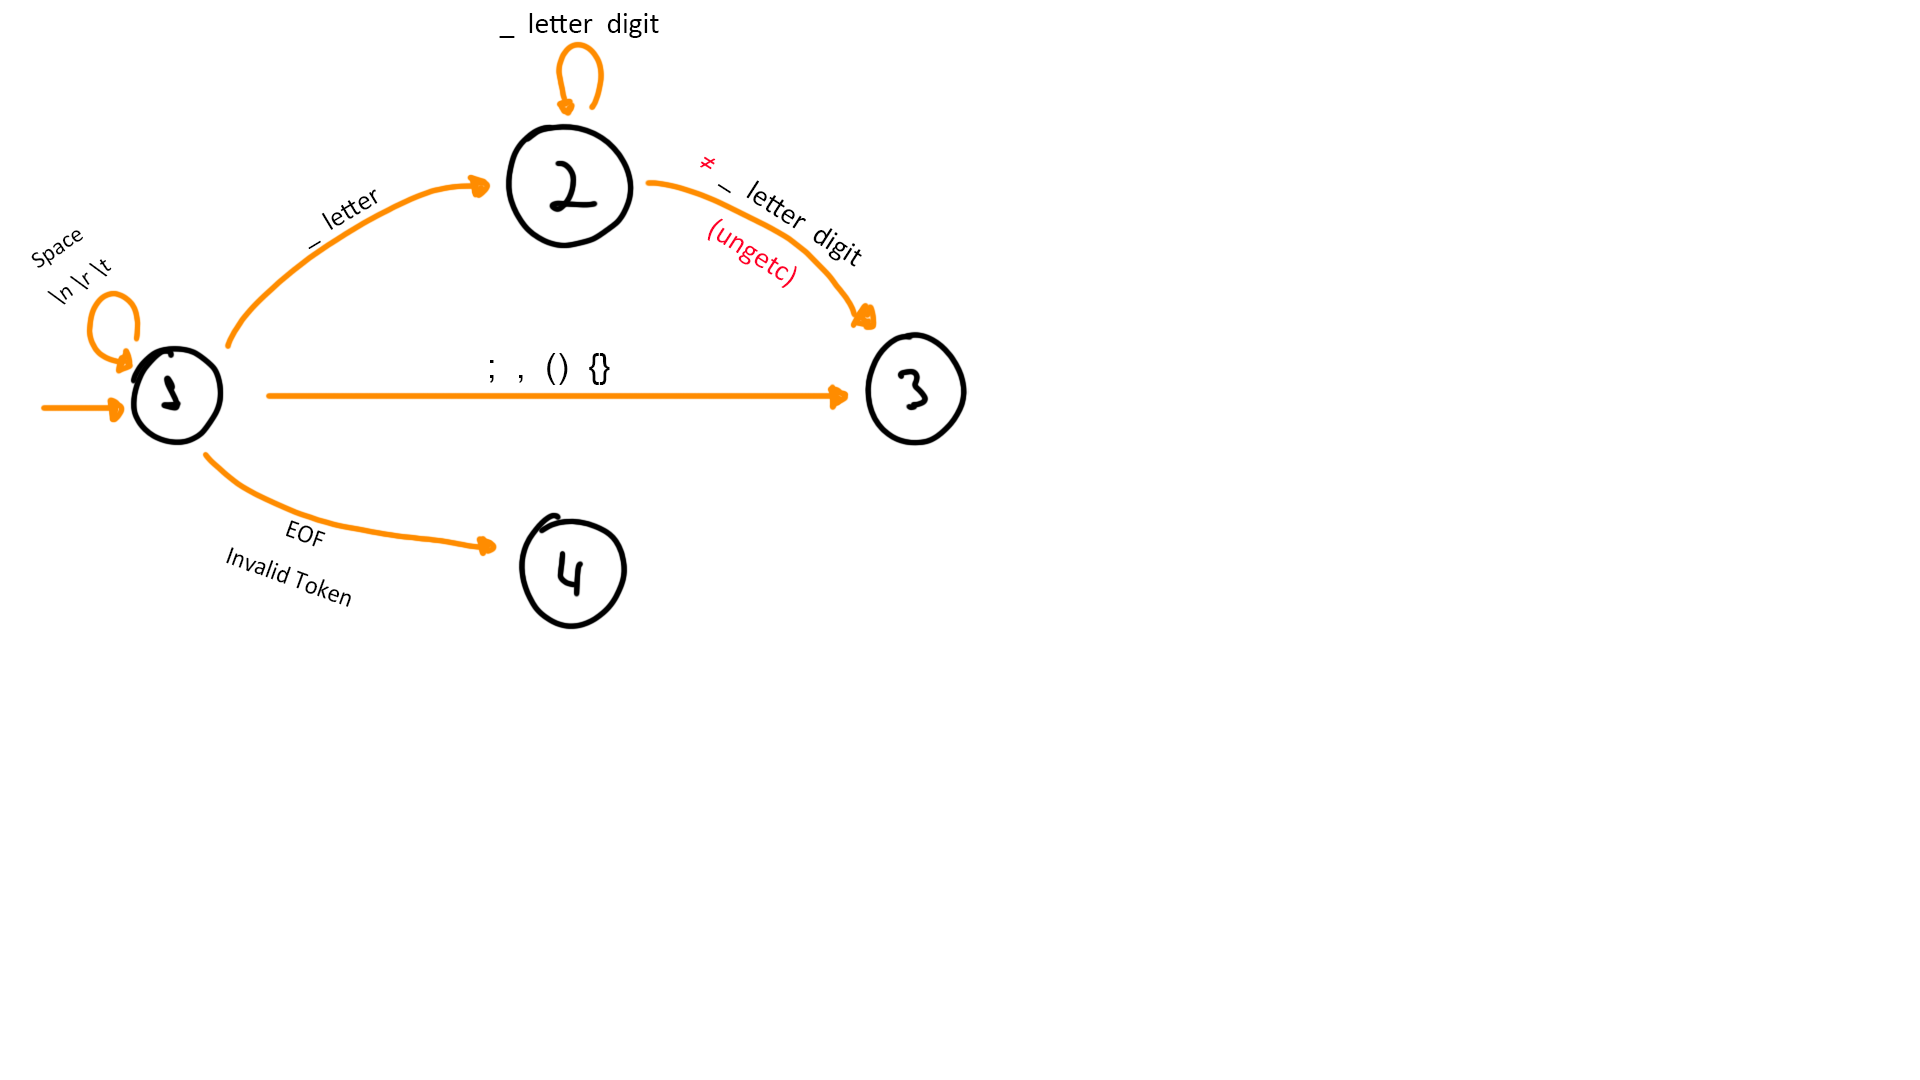
<style>
.page{position:relative;width:1920px;height:1080px;background:#ffffff}
.page>*{position:absolute;margin:0}
.t1{font:7.1px "Calibri";color:#000000}
.t2{font:7.1px "Calibri";color:#ff002a}
.t3{font:6.7px "Calibri";color:#000000}
.t4{font:5.7px "Calibri";color:#000000}
.t5{font:8.3px "ArialMT";color:#000000}
.t6{font:6.3px "Calibri";color:#000000;scale:0.94 1}
</style>
<div class="page">
<p class="t1" style="left:499px;top:13px;width:160px;height:25px;text-align:center">_  letter  digit</p>
<p class="t1" style="left:700px;top:156px;width:162px;height:132px;text-align:center;rotate:33deg"><span class="t2">≠</span>  _  letter  digit<br><span class="t2">(ungetc)</span></p>
<p class="t3" style="left:308px;top:189px;width:70px;height:60px;rotate:-31deg">_  letter</p>
<p class="t4" style="left:31px;top:230px;width:81px;height:75px;text-align:center;rotate:-34deg">Space<br>\n \r \t</p>
<p class="t5" style="left:490px;top:353px;width:120px;height:32px;text-align:center">;  ,  ()  {}</p>
<p class="t6" style="left:226px;top:520px;width:125px;height:87px;text-align:center;rotate:20deg">EOF<br>Invalid Token</p>
</div>
